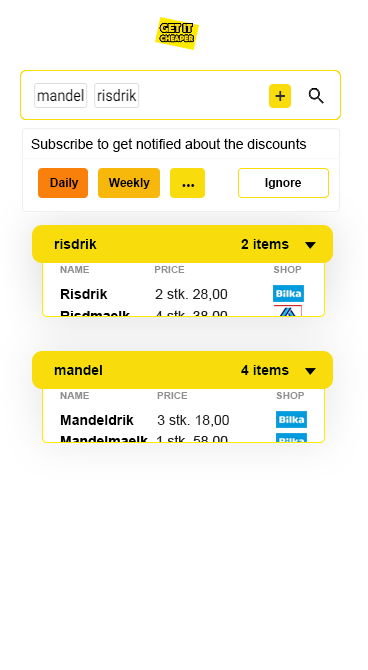
<style>
.page{position:relative;width:368px;height:670px;background:#ffffff}
.page>*{position:absolute;margin:0}
.t1{font:7.4px "BerlinSansFBDemi-Bold";color:#f8dc0b}
.t2{font:11.1px "BerlinSansFBDemi-Bold";color:#f8dc0b}
.t3{font:24px "ArialNarrow";color:#2d2d2d}
.t4{font:14px "ArialMT";color:#000000}
.t5{font:12px "Arial-BoldMT";color:#000000}
.t6{font:16px "MyanmarText-Bold";color:#000000}
.t7{font:14px "Arial-BoldMT";color:#000000}
.t8{font:14px "Arial-BoldMT";color:#010101}
.t9{font:10px "Arial-BoldMT";color:#909090}
.t10{font:14px "ArialMT";color:#222222}
</style>
<div class="page">
<p class="t1" style="left:160px;top:24px;width:33px;height:18px"><span class="t2">GET IT <br></span>CHEAPER</p>
<p class="t3" style="left:275px;top:91px;width:10px;height:10px">+</p>
<p class="t4" style="left:31px;top:138px;width:276px;height:14px">Subscribe to get notified about the discounts</p>
<p class="t5" style="left:50px;top:178px;width:29px;height:11px">Daily</p>
<p class="t5" style="left:108px;top:178px;width:42px;height:11px">Weekly</p>
<p class="t6" style="left:182px;top:184px;width:13px;height:3px">...</p>
<p class="t5" style="left:265px;top:178px;width:37px;height:11px">Ignore</p>
<p class="t7" style="left:54px;top:239px;width:43px;height:10px">risdrik</p>
<p class="t8" style="left:241px;top:239px;width:48px;height:10px">2 items</p>
<p class="t9" style="left:60px;top:266px;width:242px;height:7px">NAME          PRICE                SHOP</p>
<p class="t10" style="left:60px;top:288px;width:168px;height:13px"><span class="t7">Risdrik       </span>2 stk. 28,00</p>
<p class="t7" style="left:54px;top:365px;width:48px;height:10px">mandel</p>
<p class="t8" style="left:241px;top:365px;width:48px;height:10px">4 items</p>
<p class="t9" style="left:60px;top:392px;width:244px;height:7px">NAME           PRICE               SHOP</p>
<p class="t10" style="left:60px;top:414px;width:169px;height:13px"><span class="t7">Mandeldrik      </span>3 stk. 18,00</p>
</div>
